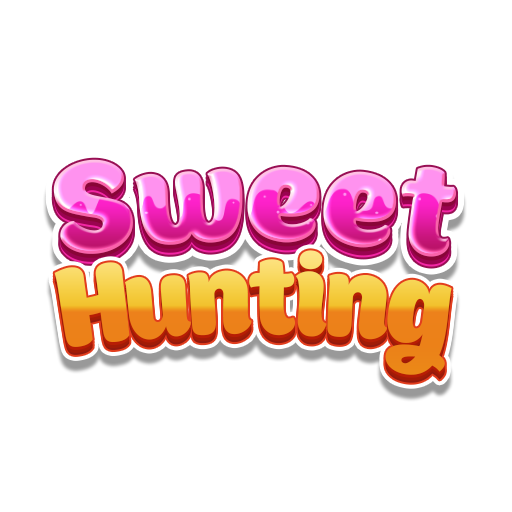
<style>
.page{position:relative;width:512px;height:512px;background:#ffffff}
.page>*{position:absolute;margin:0}
.t1{font:145.5px "Boomboom"}
.t2{font:124.7px "Boomboom";letter-spacing:-0.04em}
</style>
<div class="page">
<p class="t1" style="left:53px;top:159px;width:404px;height:98px">Sweet</p>
<p class="t2" style="left:54px;top:250px;width:398px;height:125px">Hunting</p>
</div>
